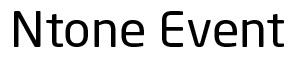
<style>
.page{position:relative;width:300px;height:59px;background:#ffffff}
.page>*{position:absolute;margin:0}
.t1{font:47.5px "NeoSansStd-Regular";color:#000000;scale:1.06 1}
</style>
<div class="page">
<p class="t1" style="left:14px;top:11px;width:270px;height:36px">Ntone Event</p>
</div>
